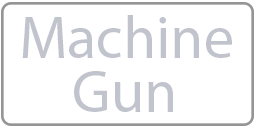
<style>
.page{position:relative;width:256px;height:128px;background:#ffffff}
.page>*{position:absolute;margin:0}
.t1{font:60px "MyriadPro-Regular";color:#c1c4cc}
</style>
<div class="page">
<p class="t1" style="left:22px;top:15px;width:210px;height:43px">Machine</p>
<p class="t1" style="left:74px;top:71px;width:99px;height:41px">Gun</p>
</div>
